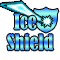
<style>
.page{position:relative;width:60px;height:60px;background:#ffffff}
.page>*{position:absolute;margin:0}
.t1{font:20px "BernardMT-Condensed"}
</style>
<div class="page">
<p class="t1" style="left:14px;top:13px;width:23px;height:17px">Ice</p>
<p class="t1" style="left:7px;top:33px;width:47px;height:18px">Shield</p>
</div>
